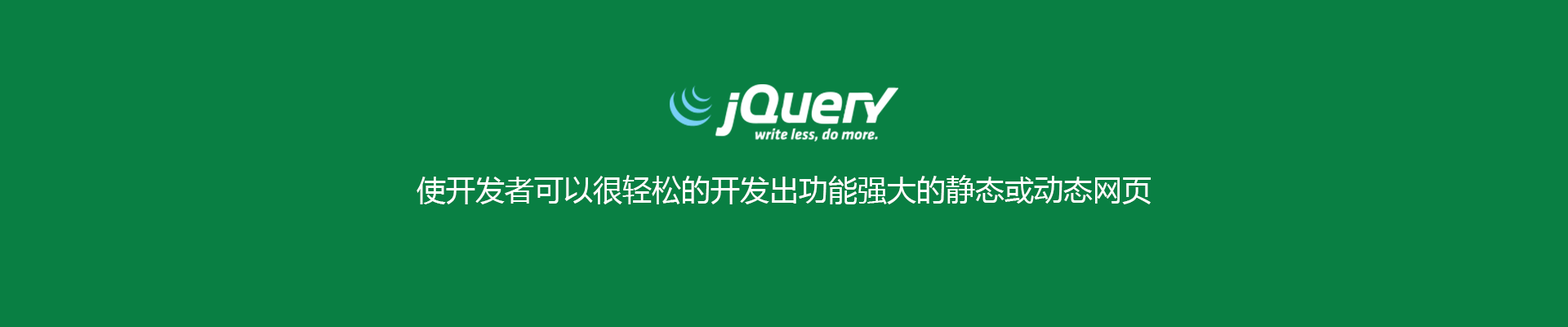
<style>
.page{position:relative;width:1568px;height:327px;background:#097f43}
.page>*{position:absolute;margin:0}
.t1{font:29.4px "MicrosoftYaHei";color:#ffffff}
</style>
<div class="page">
<p class="t1" style="left:416px;top:175px;width:735px;height:29px">使开发者可以很轻松的开发出功能强大的静态或动态网页</p>
</div>
